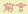
<style>
.page{position:relative;width:28px;height:14px;background:#f0f0c0}
.page>*{position:absolute;margin:0}
.t1{font:12px "IDLiMedSMP"}
</style>
<div class="page">
<p class="t1" style="left:3px;top:3px;width:24px;height:9px">前言</p>
</div>
